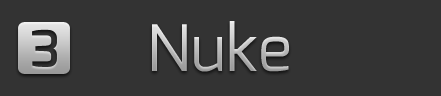
<style>
.page{position:relative;width:441px;height:96px;background:#333333}
.page>*{position:absolute;margin:0}
.t1{font:64px "Exo-Regular"}
</style>
<div class="page">
<p class="t1" style="left:152px;top:21px;width:137px;height:51px">Nuke</p>
</div>
